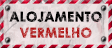
<style>
.page{position:relative;width:112px;height:48px}
.page>*{position:absolute;margin:0}
.t1{font:13.3px/16px "CenturyGothic-Bold";letter-spacing:0.005em;text-transform:uppercase;font-weight:bold}
</style>
<div class="page">
<p class="t1" style="left:9px;top:11px;width:93px;height:27px;text-align:center">alojamento<br>VERMELHO</p>
</div>
